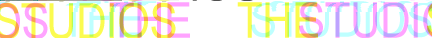
<style>
.page{position:relative;width:432px;height:38px;background:#ffffff}
.page>*{position:absolute;margin:0}
.t1{font:49.6px "ArialMT";letter-spacing:-0.01em;scale:0.85 1}
</style>
<div class="page">
<p class="t1" style="left:0px;top:0px;width:432px;height:38px">ONTHEBEATSTUDIOS</p>
</div>
